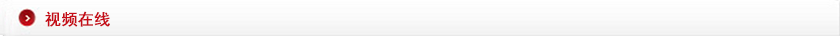
<style>
.page{position:relative;width:840px;height:36px}
.page>*{position:absolute;margin:0}
.t1{font:16px "SimHei";letter-spacing:-0.005em;color:#c50d18;font-weight:bold}
</style>
<div class="page">
<p class="t1" style="left:45px;top:11px;width:65px;height:16px">视频在线</p>
</div>
